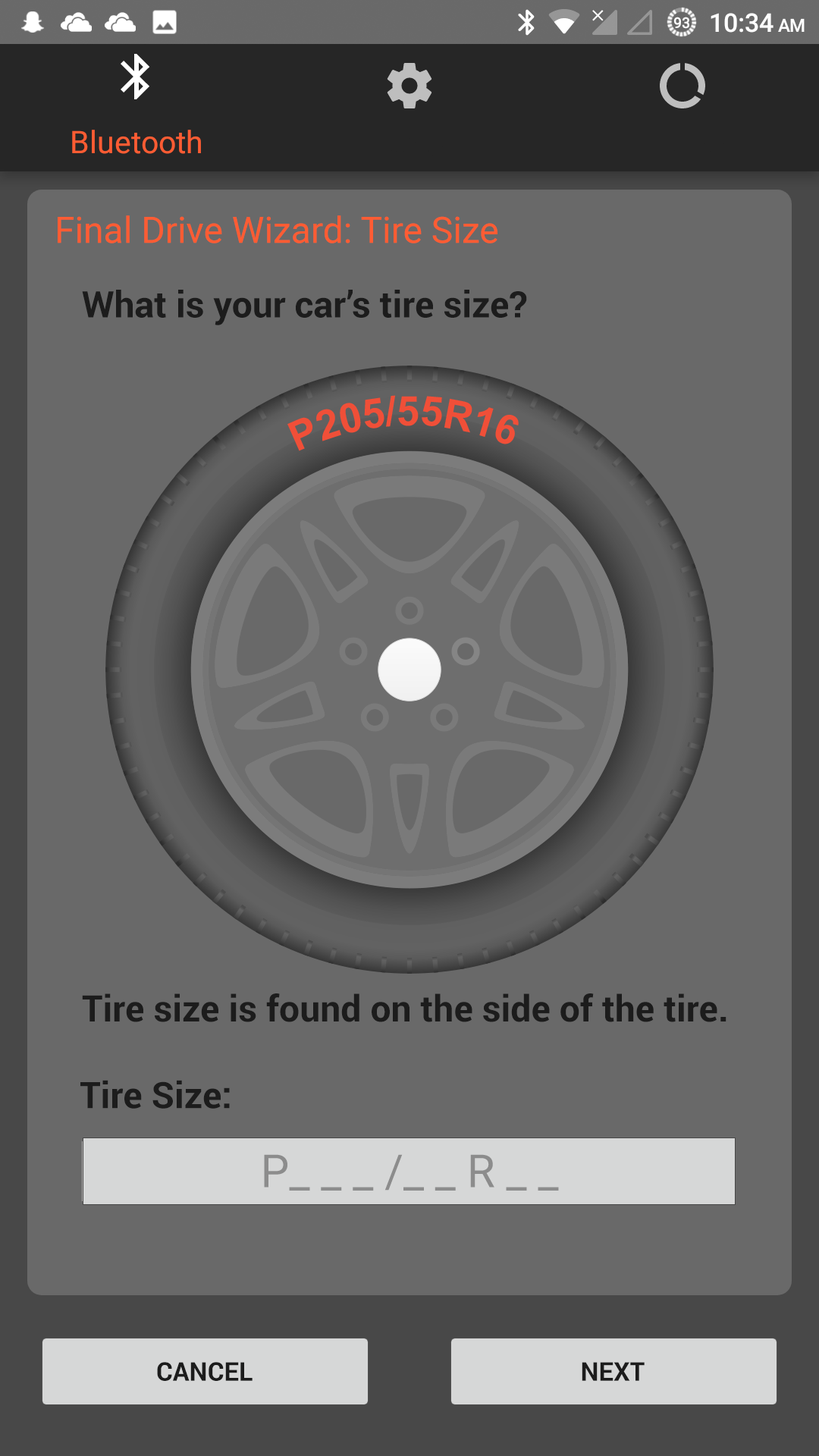
<style>
.page{position:relative;width:819px;height:1456px;background:#696969}
.page>*{position:absolute;margin:0}
.t1{font:36.4px "Roboto-Regular";color:#ff5c33}
.t2{font:36.4px "Roboto-Bold";color:#1c1c1c}
.t3{font:45.5px "Roboto-Regular";color:#8c8c8c}
.t4{font:25.8px "Roboto-Bold";color:#1c1c1c}
</style>
<div class="page">
<p class="t1" style="left:58px;top:215px;width:439px;height:28px">Final Drive Wizard: Tire Size</p>
<p class="t2" style="left:82px;top:290px;width:445px;height:35px">What is your car’s tire size?</p>
<p class="t2" style="left:82px;top:993px;width:644px;height:29px">Tire size is found on the side of the tire.</p>
<p class="t2" style="left:80px;top:1080px;width:150px;height:29px">Tire Size:</p>
<p class="t3" style="left:264px;top:1154px;width:295px;height:37px">P_ _ _ /_ _ R _ _</p>
<p class="t4" style="left:157px;top:1362px;width:96px;height:19px">CANCEL</p>
<p class="t4" style="left:582px;top:1362px;width:63px;height:19px">NEXT</p>
</div>
